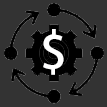
<style>
.page{position:relative;width:107px;height:107px;background:#333333}
.page>*{position:absolute;margin:0}
.t1{font:48px "AdobeHeitiStd-Regular";color:#ffffff}
</style>
<div class="page">
<p class="t1" style="left:43px;top:29px;width:21px;height:46px">$</p>
</div>
